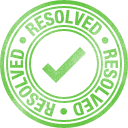
<style>
.page{position:relative;width:128px;height:128px;background:#ffffff}
.page>*{position:absolute;margin:0}
.t1{font:18px "HelveticaNeue-CondensedBold";letter-spacing:-0.032em;text-transform:uppercase}
</style>
<div class="page">
<p class="t1" style="left:10px;top:10px;width:108px;height:107px;rotate:9deg">Resolved • Resolved • Resolved •</p>
</div>
